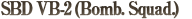
<style>
.page{position:relative;width:192px;height:19px;background:#ffffff}
.page>*{position:absolute;margin:0}
.t1{font:18px "RyuminPro-ExBold";letter-spacing:-0.08em;color:#4a3f32;font-weight:bold;scale:0.9 1}
</style>
<div class="page">
<p class="t1" style="left:1px;top:1px;width:178px;height:18px">SBD VB-2 (Bomb. Squad.)</p>
</div>
